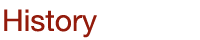
<style>
.page{position:relative;width:200px;height:40px;background:#ffffff}
.page>*{position:absolute;margin:0}
.t1{font:30px "HelveticaNeue";color:#931b0c}
</style>
<div class="page">
<p class="t1" style="left:4px;top:9px;width:93px;height:29px">History</p>
</div>
